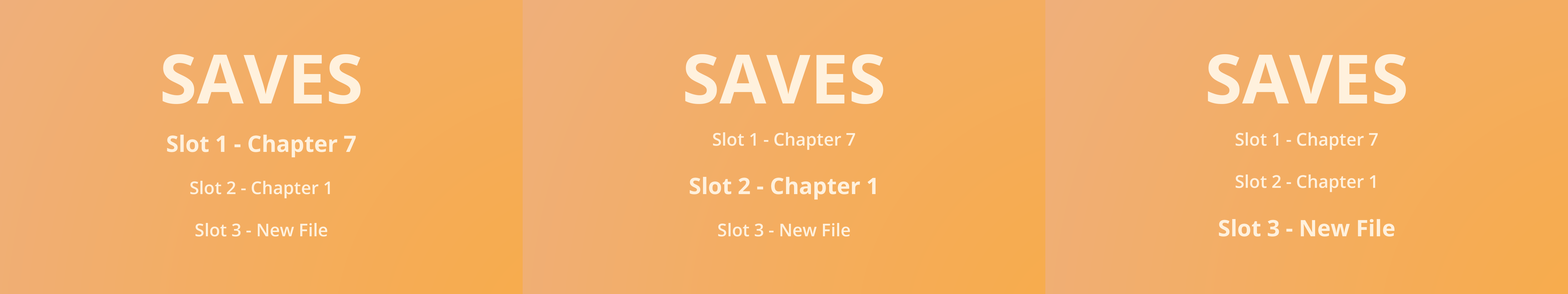
<style>
.page{position:relative;width:1568px;height:294px}
.page>*{position:absolute;margin:0}
.t1{font:17.6px "OpenSans-Semibold";color:#fff1dd}
.t2{font:17.6px "OpenSans-Bold";color:#8f8b8b}
.t3{font:68.1px "OpenSans-Bold";color:#fff1dd}
.t4{font:22.7px "OpenSans-Bold";color:#fff1dd}
</style>
<div class="page">
<p class="t1" style="left:163px;top:54px;width:198px;height:183px;text-align:center"><span class="t2"><br><br><br></span><span class="t3">SAVES<br><br></span><span class="t4">Slot 1 - Chapter 7<br></span><br>Slot 2 - Chapter 1<br><br>Slot 3 - New File</p>
<p class="t1" style="left:685px;top:54px;width:198px;height:183px;text-align:center"><span class="t2"><br><br><br></span><span class="t3">SAVES<br><br></span>Slot 1 - Chapter 7<br><br><span class="t4">Slot 2 - Chapter 1<br></span><br>Slot 3 - New File</p>
<p class="t1" style="left:1208px;top:54px;width:198px;height:183px;text-align:center"><span class="t2"><br><br><br></span><span class="t3">SAVES<br><br></span>Slot 1 - Chapter 7<br><br>Slot 2 - Chapter 1<br><br><span class="t4">Slot 3 - New File</span></p>
</div>
